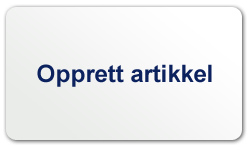
<style>
.page{position:relative;width:250px;height:150px}
.page>*{position:absolute;margin:0}
.t1{font:24px "Arial-BoldMT";color:#0c225f}
</style>
<div class="page">
<p class="t1" style="left:37px;top:64px;width:175px;height:23px">Opprett artikkel</p>
</div>
